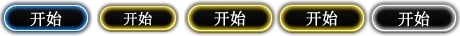
<style>
.page{position:relative;width:460px;height:36px}
.page>*{position:absolute;margin:0}
.t1{font:16px "SimSun";color:#ffffff;font-weight:bold}
.t2{font:14.4px "SimSun";color:#ffffff;font-weight:bold}
</style>
<div class="page">
<p class="t1" style="left:30px;top:11px;width:32px;height:16px">开始</p>
<p class="t2" style="left:124px;top:11px;width:28px;height:15px">开始</p>
<p class="t1" style="left:214px;top:10px;width:32px;height:16px">开始</p>
<p class="t1" style="left:306px;top:10px;width:32px;height:16px">开始</p>
<p class="t1" style="left:398px;top:11px;width:32px;height:16px">开始</p>
</div>
